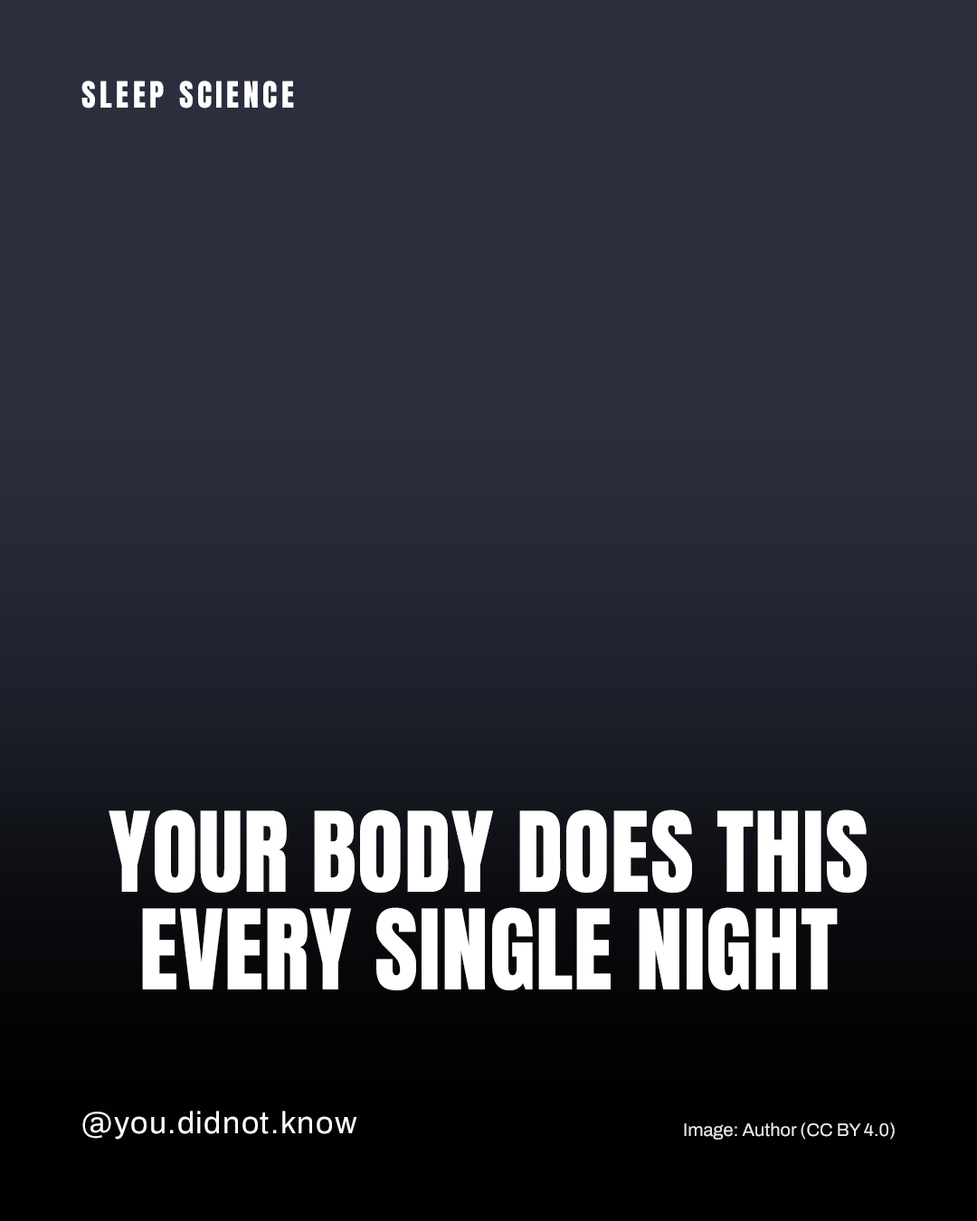
<style>
.page{position:relative;width:977px;height:1221px;background:#2a2e3d}
.page>*{position:absolute;margin:0}
.t1{font:30.7px "Anton-Regular";letter-spacing:0.12em;color:#ffffff;text-transform:uppercase}
.t2{font:94.1px/97.7px "Anton-Regular";color:#ffffff;text-transform:uppercase}
.t3{font:30.7px "Archivo-Regular";letter-spacing:0.04em;color:#ffffff}
.t4{font:18.1px "Archivo-Regular";color:#ededed}
</style>
<div class="page">
<p class="t1" style="left:81px;top:80px;width:213px;height:29px">SLEEP SCIENCE</p>
<p class="t2" style="left:109px;top:809px;width:757px;height:181px;text-align:center">YOUR BODY DOES THIS EVERY SINGLE NIGHT</p>
<p class="t3" style="left:82px;top:1111px;width:275px;height:28px">@you.didnot.know</p>
<p class="t4" style="left:684px;top:1122px;width:210px;height:17px">Image: Author (CC BY 4.0)</p>
</div>
